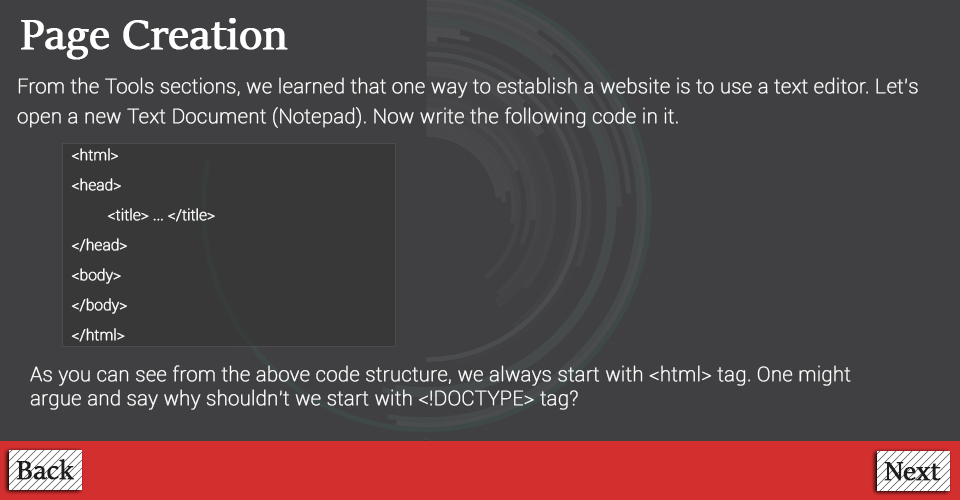
<style>
.page{position:relative;width:960px;height:500px;background:#404042}
.page>*{position:absolute;margin:0}
.t1{font:48px "SitkaBanner";color:#ffffff;font-weight:bold}
.t2{font:20px/30px "Roboto-Thin";color:#ffffff;font-weight:bold}
.t3{font:15px/30px "Roboto-Thin";color:#ffffff;font-weight:bold}
.t4{font:20px "Roboto-Thin";color:#ffffff;font-weight:bold}
.t5{font:30px "SitkaBanner";color:#1e1e1e;font-weight:bold}
</style>
<div class="page">
<p class="t1" style="left:21px;top:18px;width:267px;height:42px">Page Creation</p>
<p class="t2" style="left:17px;top:77px;width:901px;height:51px">From the Tools sections, we learned that one way to establish a website is to use a text editor. Let’s open a new Text Document (Notepad). Now write the following code in it.</p>
<p class="t3" style="left:71px;top:148px;width:144px;height:194px">&lt;html&gt;<br>&lt;head&gt;<br> &lt;title&gt; ... &lt;/title&gt;<br>&lt;/head&gt;<br>&lt;body&gt;<br>&lt;/body&gt;<br>&lt;/html&gt;</p>
<p class="t4" style="left:30px;top:365px;width:821px;height:45px">As you can see from the above code structure, we always start with &lt;html&gt; tag. One might argue and say why shouldn't we start with &lt;!DOCTYPE&gt; tag?</p>
<p class="t5" style="left:16px;top:459px;width:59px;height:21px">Back</p>
<p class="t5" style="left:884px;top:462px;width:57px;height:19px">Next</p>
</div>
